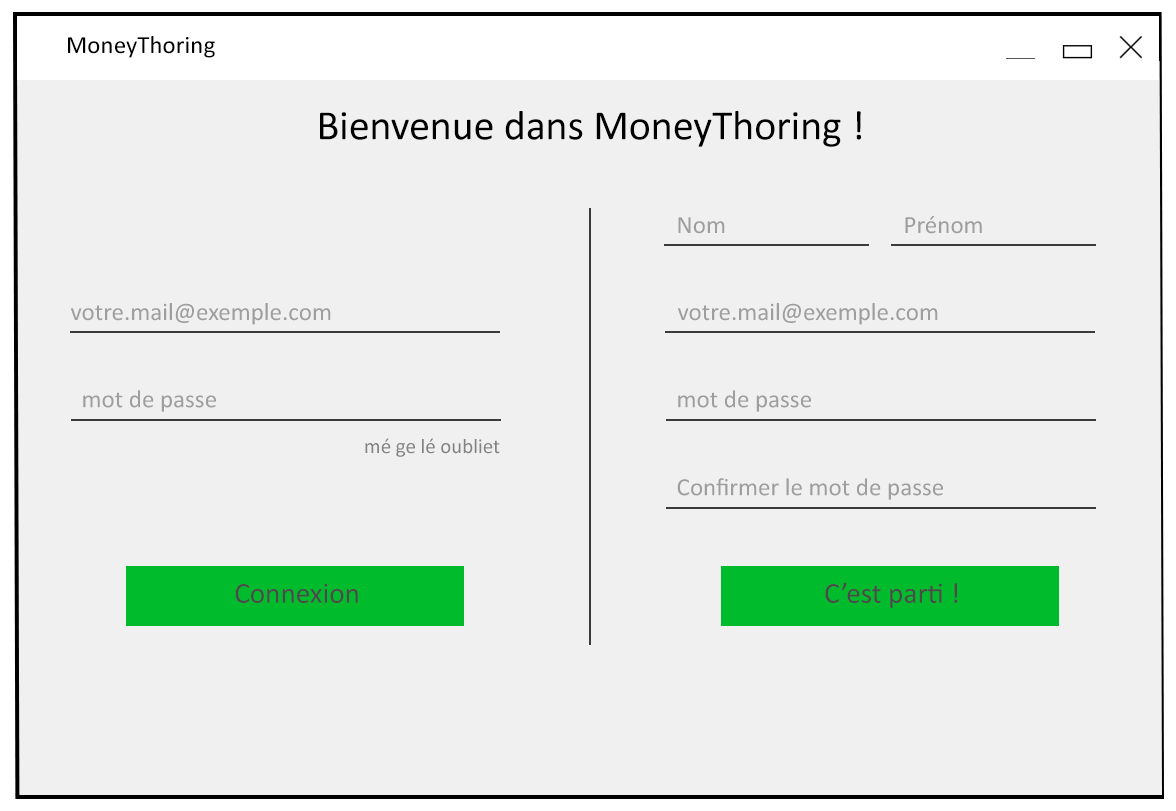
<style>
.page{position:relative;width:1176px;height:811px;background:#f0f0f0}
.page>*{position:absolute;margin:0}
.t1{font:25px "Calibri";color:#010101}
.t2{font:41.7px "Calibri";color:#000000}
.t3{font:25px "Calibri";color:#9e9e9e}
.t4{font:20.8px "Calibri";color:#838383}
.t5{font:29.2px "Calibri";color:#4a4a4a}
</style>
<div class="page">
<p class="t1" style="left:68px;top:36px;width:147px;height:22px">MoneyThoring</p>
<p class="t2" style="left:320px;top:111px;width:541px;height:36px">Bienvenue dans MoneyThoring !</p>
<p class="t3" style="left:678px;top:217px;width:47px;height:17px">Nom</p>
<p class="t3" style="left:905px;top:216px;width:77px;height:18px">Prénom</p>
<p class="t3" style="left:71px;top:303px;width:260px;height:22px">votre.mail@exemple.com</p>
<p class="t3" style="left:678px;top:303px;width:260px;height:22px">votre.mail@exemple.com</p>
<p class="t3" style="left:83px;top:390px;width:133px;height:22px">mot de passe</p>
<p class="t3" style="left:678px;top:390px;width:133px;height:22px">mot de passe</p>
<p class="t4" style="left:365px;top:438px;width:135px;height:19px">mé ge lé oubliet</p>
<p class="t3" style="left:677px;top:478px;width:266px;height:22px">Confirmer le mot de passe</p>
<p class="t5" style="left:825px;top:582px;width:133px;height:26px">C’est parti !</p>
<p class="t5" style="left:235px;top:583px;width:123px;height:20px">Connexion</p>
</div>
